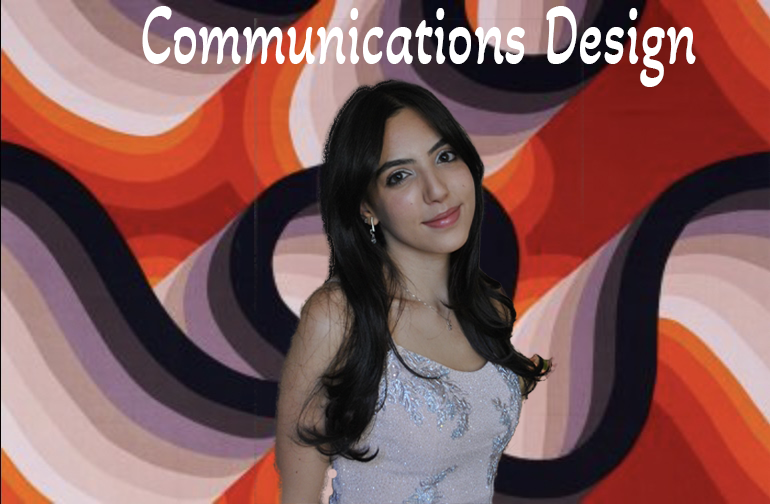
<style>
.page{position:relative;width:770px;height:504px}
.page>*{position:absolute;margin:0}
.t1{font:88.4px "AkayaTelivigala-Regular";color:#ffffff;scale:0.65 1}
</style>
<div class="page">
<p class="t1" style="left:142px;top:6px;width:554px;height:81px">Communications Design</p>
</div>
